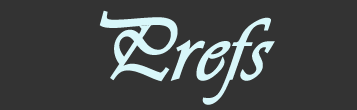
<style>
.page{position:relative;width:357px;height:110px;background:#333333}
.page>*{position:absolute;margin:0}
.t1{font:90px "Vivaldii";color:#daf9fc;font-weight:bold}
</style>
<div class="page">
<p class="t1" style="left:99px;top:10px;width:176px;height:95px">Prefs</p>
</div>
